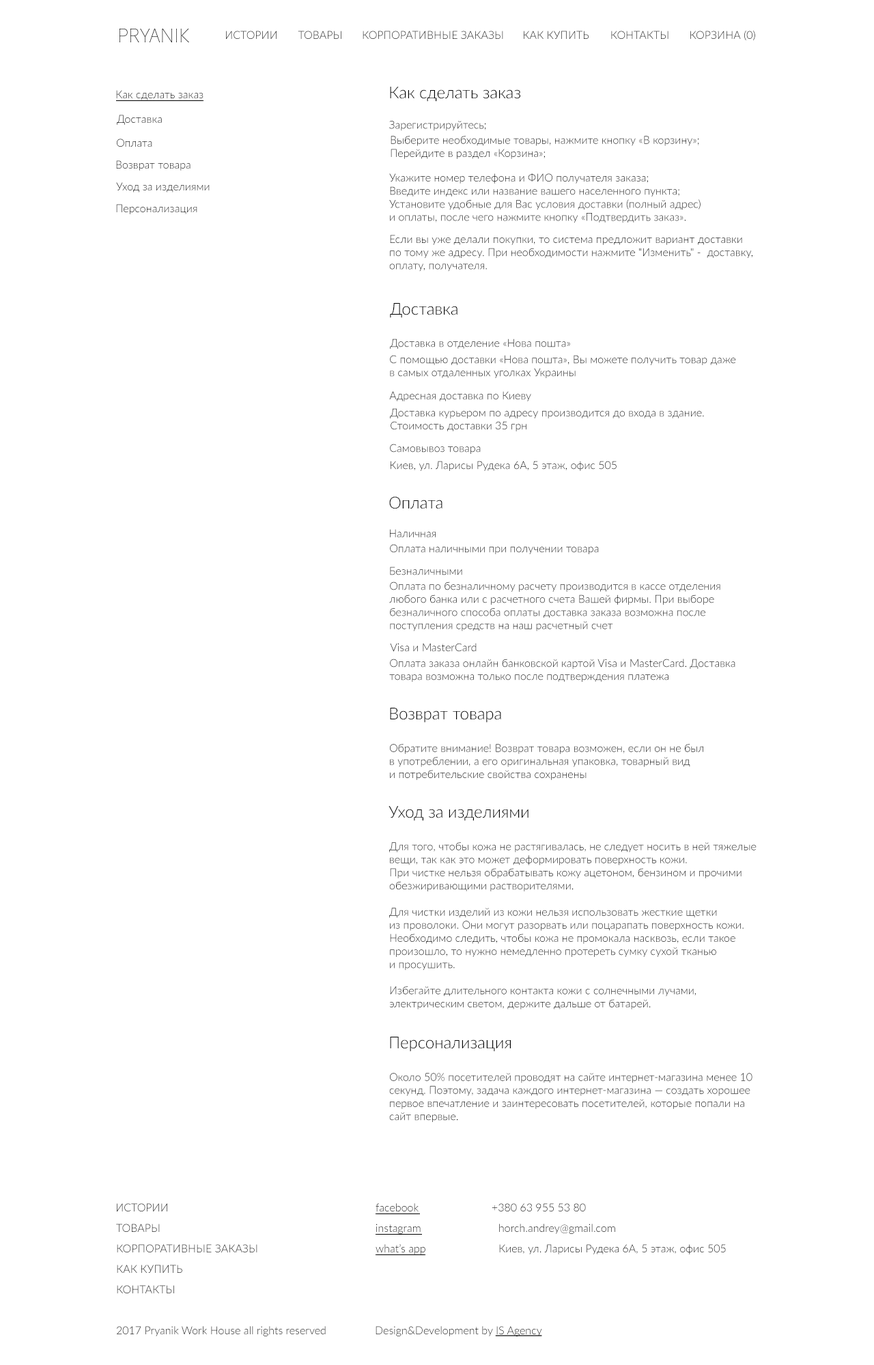
<style>
.page{position:relative;width:874px;height:1365px;background:#ffffff}
.page>*{position:absolute;margin:0}
.t1{font:10.9px "Lato-Light";text-transform:uppercase}
.t2{font:16.4px "Lato-Light";color:#000000}
.t3{font:10.9px "Lato-Light"}
.t4{font:10.9px "Lato-Light";color:#000000}
.t5{font:10.9px "Lato-Light";color:#000000;text-decoration:underline}
</style>
<div class="page">
<p class="t1" style="left:226px;top:31px;width:50px;height:8px">Истории</p>
<p class="t1" style="left:298px;top:31px;width:43px;height:8px">Товары</p>
<p class="t1" style="left:362px;top:31px;width:141px;height:8px">КоРпоративные заказы</p>
<p class="t1" style="left:523px;top:31px;width:65px;height:8px">как купить</p>
<p class="t1" style="left:611px;top:31px;width:57px;height:8px">Контакты</p>
<p class="t1" style="left:690px;top:30px;width:65px;height:10px">Корзина (0)</p>
<p class="t2" style="left:390px;top:87px;width:130px;height:15px">Как сделать заказ</p>
<p class="t3" style="left:116px;top:90px;width:87px;height:10px">Как сделать заказ</p>
<p class="t3" style="left:117px;top:115px;width:45px;height:10px">Доставка</p>
<p class="t4" style="left:389px;top:121px;width:97px;height:10px">Зарегистрируйтесь;</p>
<p class="t4" style="left:390px;top:136px;width:309px;height:23px">Выберите необходимые товары, нажмите кнопку «В корзину»;<br>Перейдите в раздел «Корзина»;</p>
<p class="t3" style="left:117px;top:139px;width:35px;height:8px">Оплата</p>
<p class="t3" style="left:116px;top:160px;width:74px;height:11px">Возврат товара</p>
<p class="t4" style="left:389px;top:173px;width:311px;height:50px">Укажите номер телефона и ФИО получателя заказа;<br>Введите индекс или название вашего населенного пункта;<br>Установите удобные для Вас условия доставки (полный адрес) <br>и оплаты, после чего нажмите кнопку «Подтвердить заказ».</p>
<p class="t4" style="left:116px;top:182px;width:94px;height:10px">Уход за изделиями</p>
<p class="t3" style="left:116px;top:204px;width:81px;height:10px">Персонализация</p>
<p class="t4" style="left:389px;top:235px;width:363px;height:37px">Если вы уже делали покупки, то система предложит вариант доставки <br>по тому же адресу. При необходимости нажмите "Изменить" -  доставку, <br>оплату, получателя.</p>
<p class="t2" style="left:390px;top:303px;width:67px;height:15px">Доставка</p>
<p class="t3" style="left:390px;top:339px;width:180px;height:10px">Доставка в отделение «Нова пошта»</p>
<p class="t4" style="left:390px;top:355px;width:346px;height:23px">С помощью доставки «Нова пошта», Вы можете получить товар даже <br>в самых отдаленных уголках Украины</p>
<p class="t4" style="left:389px;top:391px;width:142px;height:10px">Адресная доставка по Киеву</p>
<p class="t3" style="left:390px;top:408px;width:314px;height:23px">Доставка курьером по адресу производится до входа в здание. <br>Стоимость доставки 35 грн</p>
<p class="t3" style="left:390px;top:444px;width:90px;height:10px">Самовывоз товара</p>
<p class="t4" style="left:390px;top:461px;width:226px;height:10px">Киев, ул. Ларисы Рудека 6А, 5 этаж, офис 505</p>
<p class="t2" style="left:389px;top:496px;width:53px;height:13px">Оплата</p>
<p class="t3" style="left:390px;top:529px;width:45px;height:9px">Наличная</p>
<p class="t3" style="left:390px;top:544px;width:209px;height:10px">Оплата наличными при получении товара</p>
<p class="t3" style="left:390px;top:566px;width:72px;height:9px">Безналичными</p>
<p class="t4" style="left:389px;top:581px;width:331px;height:50px">Оплата по безналичному расчету производится в кассе отделения любого банка или с расчетного счета Вашей фирмы. При выборе безналичного способа оплаты доставка заказа возможна после поступления средств на наш расчетный счет</p>
<p class="t4" style="left:390px;top:643px;width:86px;height:9px">Visa и MasterCard</p>
<p class="t4" style="left:389px;top:659px;width:346px;height:23px">Оплата заказа онлайн банковской картой Visa и MasterCard. Доставка товара возможна только после подтверждения платежа</p>
<p class="t2" style="left:390px;top:708px;width:111px;height:15px">Возврат товара</p>
<p class="t4" style="left:390px;top:744px;width:313px;height:36px">Обратите внимание! Возврат товара возможен, если он не был <br>в употреблении, а его оригинальная упаковка, товарный вид <br>и потребительские свойства сохранены</p>
<p class="t2" style="left:388px;top:806px;width:140px;height:15px">Уход за изделиями</p>
<p class="t4" style="left:389px;top:842px;width:367px;height:167px">Для того, чтобы кожа не растягивалась, не следует носить в ней тяжелые вещи, так как это может деформировать поверхность кожи.<br>При чистке нельзя обрабатывать кожу ацетоном, бензином и прочими обезжиривающими растворителями.<br><br>Для чистки изделий из кожи нельзя использовать жесткие щетки <br>из проволоки. Они могут разорвать или поцарапать поверхность кожи.<br>Необходимо следить, чтобы кожа не промокала насквозь, если такое произошло, то нужно немедленно протереть сумку сухой тканью <br>и просушить.<br><br>Избегайте длительного контакта кожи с солнечными лучами, электрическим светом, держите дальше от батарей.</p>
<p class="t2" style="left:390px;top:1037px;width:121px;height:15px">Персонализация</p>
<p class="t4" style="left:389px;top:1073px;width:363px;height:49px">Около 50% посетителей проводят на сайте интернет-магазина менее 10 секунд. Поэтому, задача каждого интернет-магазина — создать хорошее первое впечатление и заинтересовать посетителей, которые попали на сайт впервые.</p>
<p class="t3" style="left:117px;top:1203px;width:50px;height:8px">ИСТОРИИ</p>
<p class="t3" style="left:375px;top:1203px;width:43px;height:8px">facebook</p>
<p class="t3" style="left:491px;top:1203px;width:95px;height:8px">+380 63 955 53 80</p>
<p class="t3" style="left:116px;top:1224px;width:44px;height:8px">ТОВАРЫ</p>
<p class="t3" style="left:376px;top:1224px;width:44px;height:10px">instagram</p>
<p class="t3" style="left:499px;top:1224px;width:116px;height:10px">horch.andrey@gmail.com</p>
<p class="t1" style="left:117px;top:1244px;width:140px;height:8px">Корпоративные заказы</p>
<p class="t3" style="left:375px;top:1244px;width:50px;height:10px">what’s app</p>
<p class="t3" style="left:499px;top:1244px;width:226px;height:10px">Киев, ул. Ларисы Рудека 6А, 5 этаж, офис 505</p>
<p class="t1" style="left:117px;top:1265px;width:65px;height:8px">Как купить</p>
<p class="t3" style="left:117px;top:1285px;width:57px;height:8px">КОНТАКТЫ</p>
<p class="t3" style="left:117px;top:1326px;width:209px;height:10px">2017 Pryanik Work House all rights reserved</p>
<p class="t4" style="left:375px;top:1326px;width:167px;height:10px">Design&amp;Development by <span class="t5">IS Agency</span></p>
</div>
